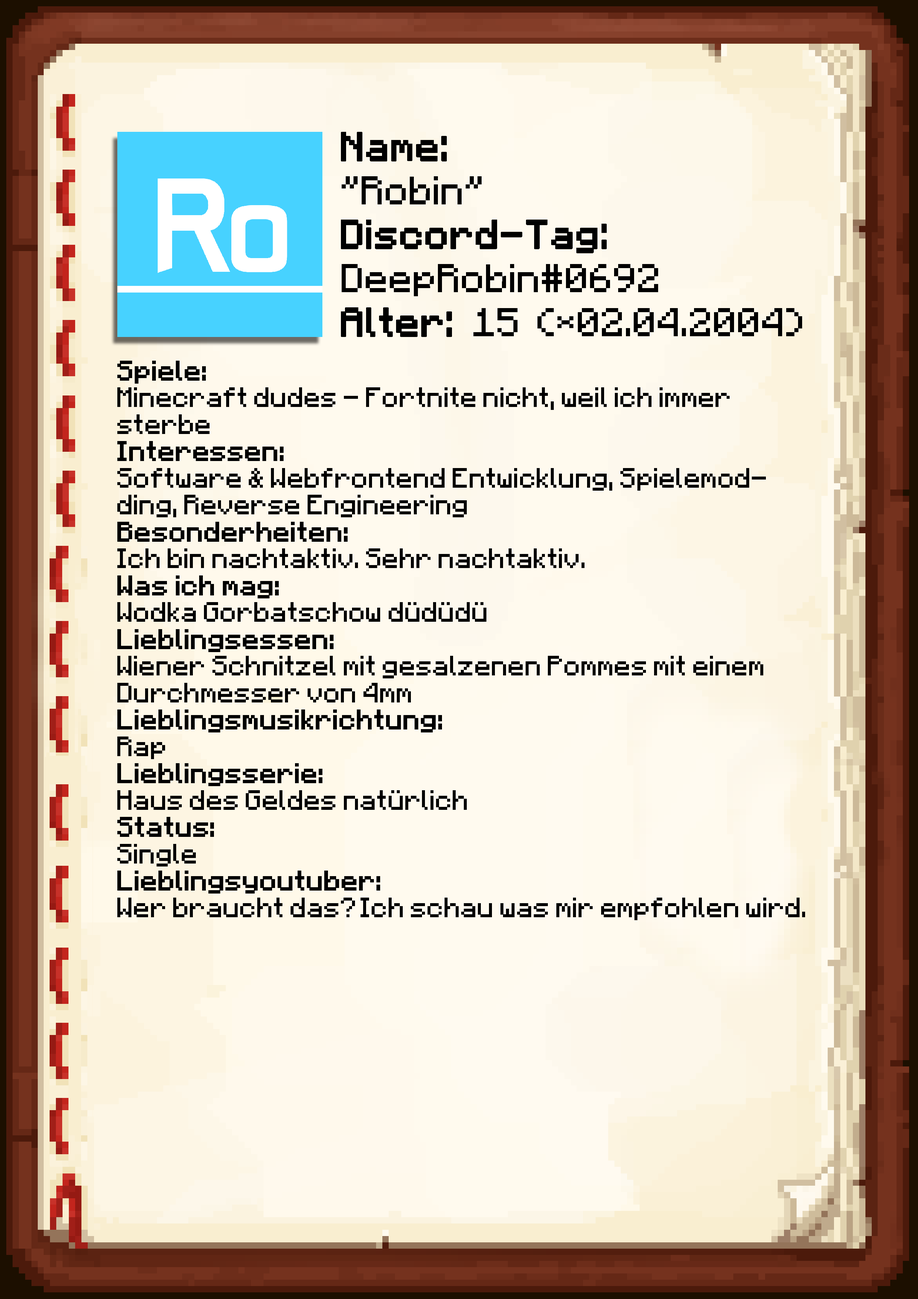
<style>
.page{position:relative;width:918px;height:1299px}
.page>*{position:absolute;margin:0}
.t1{font:40.1px/43.9px "Minecraft-Regular";color:#000000}
.t2{font:40.1px/43.9px "Minecraft-Regular";color:#000000;font-weight:bold}
.t3{font:22.4px "Minecraft";color:#000000}
.t4{font:22.4px "Minecraft";color:#000000;font-weight:bold}
</style>
<div class="page">
<p class="t1" style="left:341px;top:132px;width:461px;height:205px"><span class="t2">Name:<br></span>"Robin"<br><span class="t2">Discord-Tag:<br></span>DeepRobin#0692<br><span class="t2">Alter: </span>15 (*02.04.2004)</p>
<p class="t3" style="left:117px;top:361px;width:688px;height:559px"><span class="t4">Spiele: <br></span>Minecraft dudes - Fortnite nicht, weil ich immer sterbe<br><span class="t4">Interessen:<br></span>Software &amp; Webfrontend Entwicklung, Spielemodding, Reverse Engineering<br><span class="t4">Besonderheiten:<br></span>Ich bin nachtaktiv. Sehr nachtaktiv.<br><span class="t4">Was ich mag:<br></span>Wodka Gorbatschow düdüdü<br><span class="t4">Lieblingsessen:<br></span>Wiener Schnitzel mit gesalzenen Pommes mit einem Durchmesser von 4mm<br><span class="t4">Lieblingsmusikrichtung:<br></span>Rap<br><span class="t4">Lieblingsserie:<br></span>Haus des Geldes natürlich<br><span class="t4">Status:<br></span>Single<br><span class="t4">Lieblingsyoutuber:<br></span>Wer braucht das? Ich schau was mir empfohlen wird.</p>
</div>
